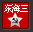
<style>
.page{position:relative;width:33px;height:32px;background:#c50000}
.page>*{position:absolute;margin:0}
.t1{font:10.4px "SimSun";letter-spacing:-0.25em;color:#ffffff}
</style>
<div class="page">
<p class="t1" style="left:4px;top:4px;width:24px;height:9px">东海三</p>
</div>
